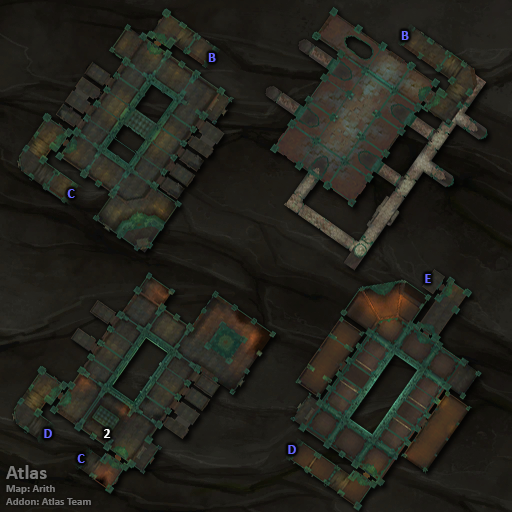
<style>
.page{position:relative;width:512px;height:512px}
.page>*{position:absolute;margin:0}
.t1{font:14px "Calibri-Bold";color:#6666ff}
.t2{font:14px "Calibri-Bold";color:#ffffff}
.t3{font:11px "Calibri-Bold";color:#7a7a78}
.t4{font:20px "Calibri-Bold";color:#7a7a78}
</style>
<div class="page">
<p class="t1" style="left:401px;top:31px;width:8px;height:9px">B</p>
<p class="t1" style="left:208px;top:53px;width:8px;height:9px">B</p>
<p class="t1" style="left:67px;top:189px;width:8px;height:9px">C</p>
<p class="t1" style="left:425px;top:274px;width:6px;height:9px">E</p>
<p class="t1" style="left:44px;top:429px;width:8px;height:9px">D</p>
<p class="t2" style="left:104px;top:429px;width:7px;height:9px">2</p>
<p class="t1" style="left:288px;top:445px;width:8px;height:9px">D</p>
<p class="t1" style="left:77px;top:454px;width:8px;height:9px">C</p>
<p class="t3" style="left:6px;top:465px;width:85px;height:40px"><span class="t4">Atlas<br></span>Map: Arith<br>Addon: Atlas Team</p>
</div>
